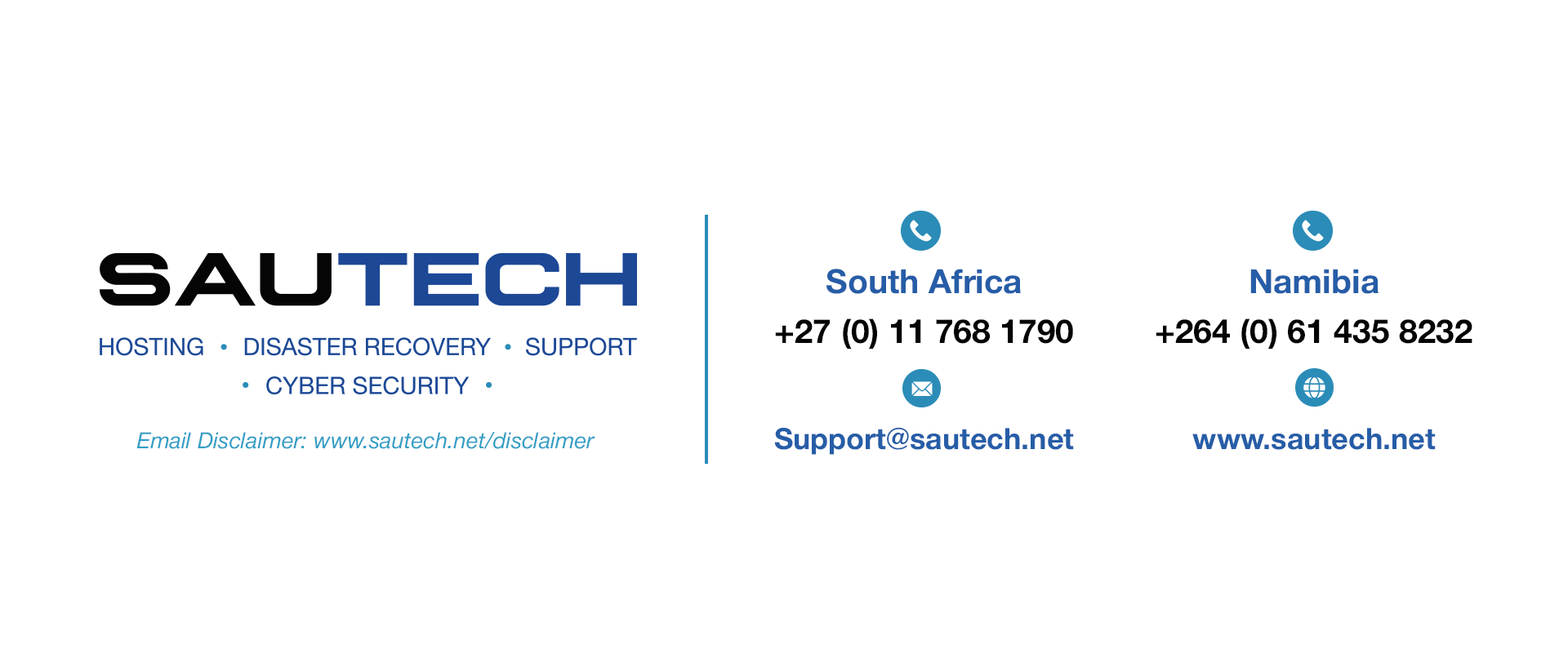
<style>
.page{position:relative;width:1568px;height:672px;background:#ffffff}
.page>*{position:absolute;margin:0}
.t1{font:33.4px "HelveticaNeue-Bold";color:#265da7}
.t2{font:33.4px "HelveticaNeue-Bold";color:#030303}
.t3{font:22.4px "HelveticaNeue-Italic";color:#339ec5}
.t4{font:29.4px "HelveticaNeue-Bold";color:#265da7}
</style>
<div class="page">
<p class="t1" style="left:826px;top:269px;width:195px;height:25px">South Africa</p>
<p class="t1" style="left:1250px;top:270px;width:129px;height:24px">Namibia</p>
<p class="t2" style="left:775px;top:318px;width:298px;height:32px">+27 (0) 11 768 1790</p>
<p class="t2" style="left:1156px;top:318px;width:316px;height:32px">+264 (0) 61 435 8232</p>
<p class="t3" style="left:136px;top:432px;width:459px;height:17px">Email Disclaimer: www.sautech.net/disclaimer</p>
<p class="t4" style="left:774px;top:427px;width:300px;height:28px">Support@sautech.net</p>
<p class="t4" style="left:1192px;top:428px;width:244px;height:22px">www.sautech.net</p>
</div>
